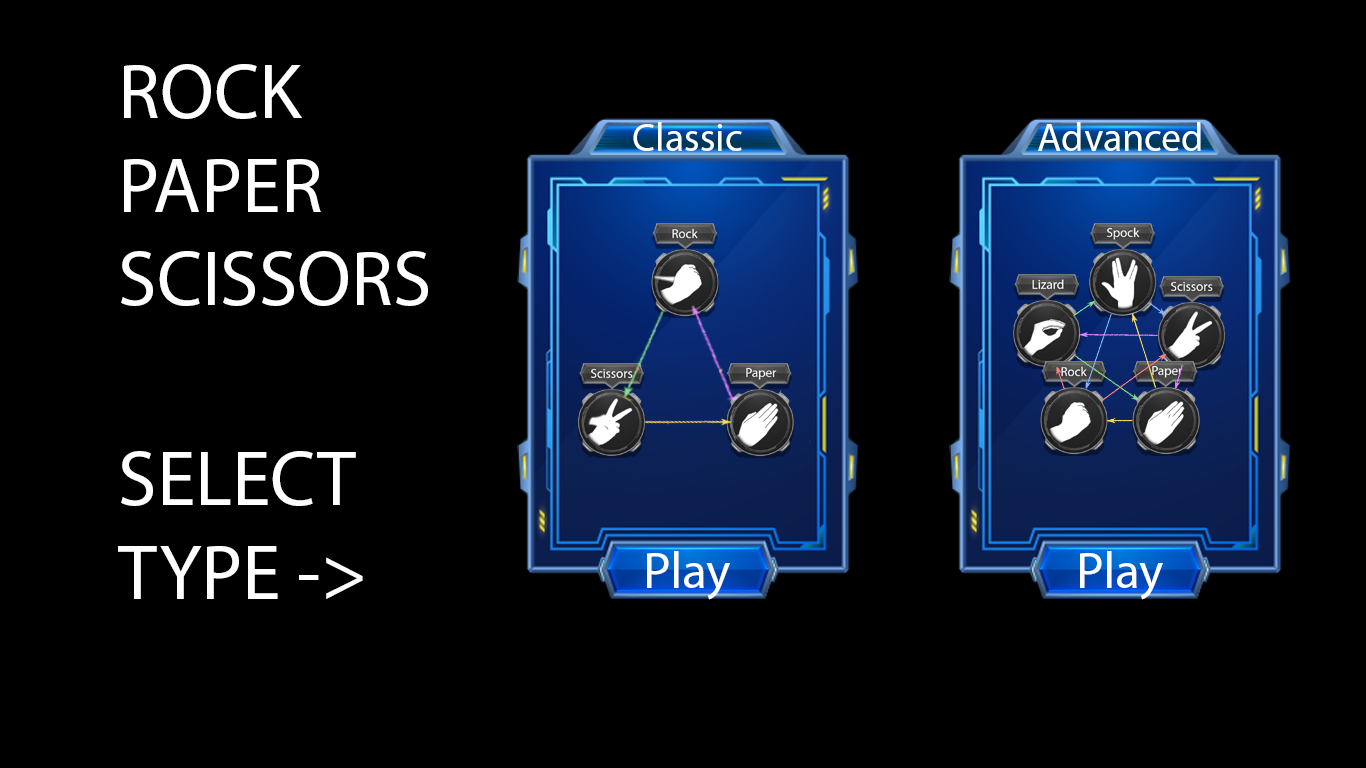
<style>
.page{position:relative;width:1366px;height:768px;background:#000000}
.page>*{position:absolute;margin:0}
.t1{font:77.9px "MyriadPro-Regular";color:#ffffff}
.t2{font:39.7px "MyriadPro-Regular";color:#ffffff}
.t3{font:51.4px "MyriadPro-Regular";color:#ffffff}
</style>
<div class="page">
<p class="t1" style="left:121px;top:64px;width:307px;height:242px">ROCK<br>PAPER<br>SCISSORS</p>
<p class="t2" style="left:633px;top:122px;width:109px;height:29px">Classic</p>
<p class="t2" style="left:1038px;top:122px;width:163px;height:29px">Advanced</p>
<p class="t1" style="left:118px;top:451px;width:245px;height:148px">SELECT<br>TYPE -&gt;</p>
<p class="t3" style="left:647px;top:551px;width:83px;height:49px">Play</p>
<p class="t3" style="left:1080px;top:551px;width:83px;height:49px">Play</p>
</div>
